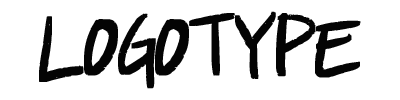
<style>
.page{position:relative;width:400px;height:100px;background:#ffffff}
.page>*{position:absolute;margin:0}
.t1{font:60px "UhBeeCreator";color:#040404}
</style>
<div class="page">
<p class="t1" style="left:39px;top:11px;width:322px;height:78px">LOGOTYPE</p>
</div>
